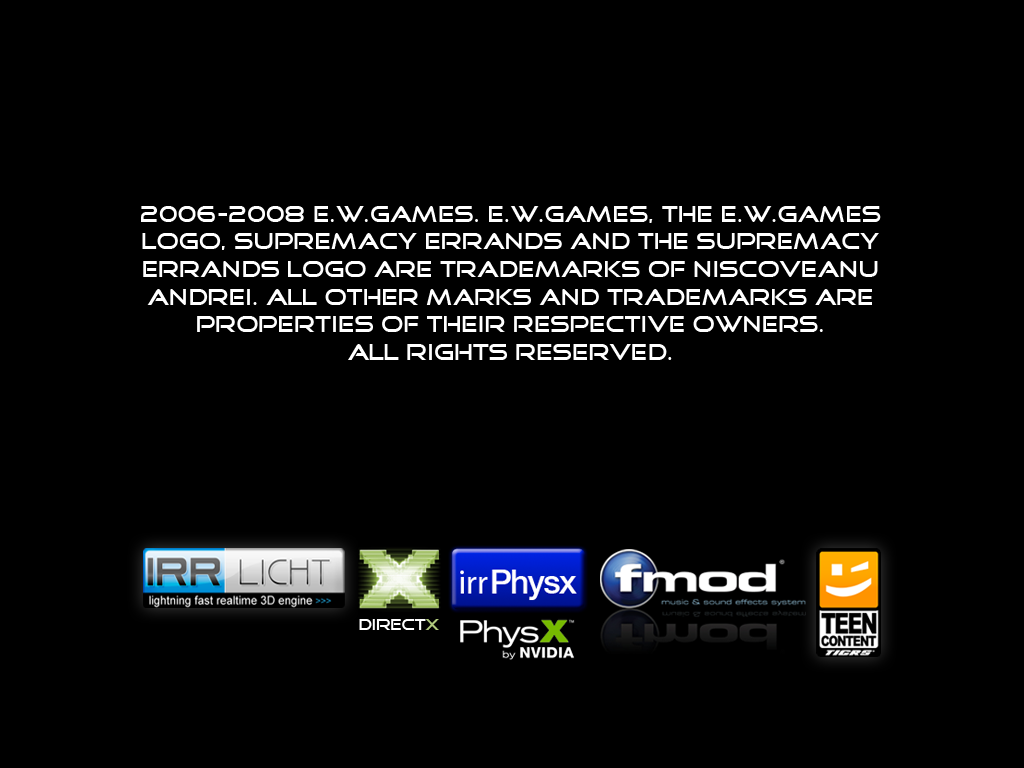
<style>
.page{position:relative;width:1024px;height:768px;background:#000000}
.page>*{position:absolute;margin:0}
.t1{font:23px "GoodTimes";color:#ffffff}
.t2{font:15.6px "GoodTimes";color:#ffffff}
.t3{font:15.6px "GoodTimes";color:#afc87c}
</style>
<div class="page">
<p class="t1" style="left:141px;top:206px;width:740px;height:154px;text-align:center">2006-2008 E.W.Games. E.W.Games, the E.W.Games logo, supremacy errands and the supremacy errands logo are trademarks of niscoveanu andrei. all other marks and trademarks are properties of their respective owners.<br>All rights reserved.</p>
<p class="t2" style="left:359px;top:619px;width:80px;height:11px">DIRECT<span class="t3">X</span></p>
</div>
